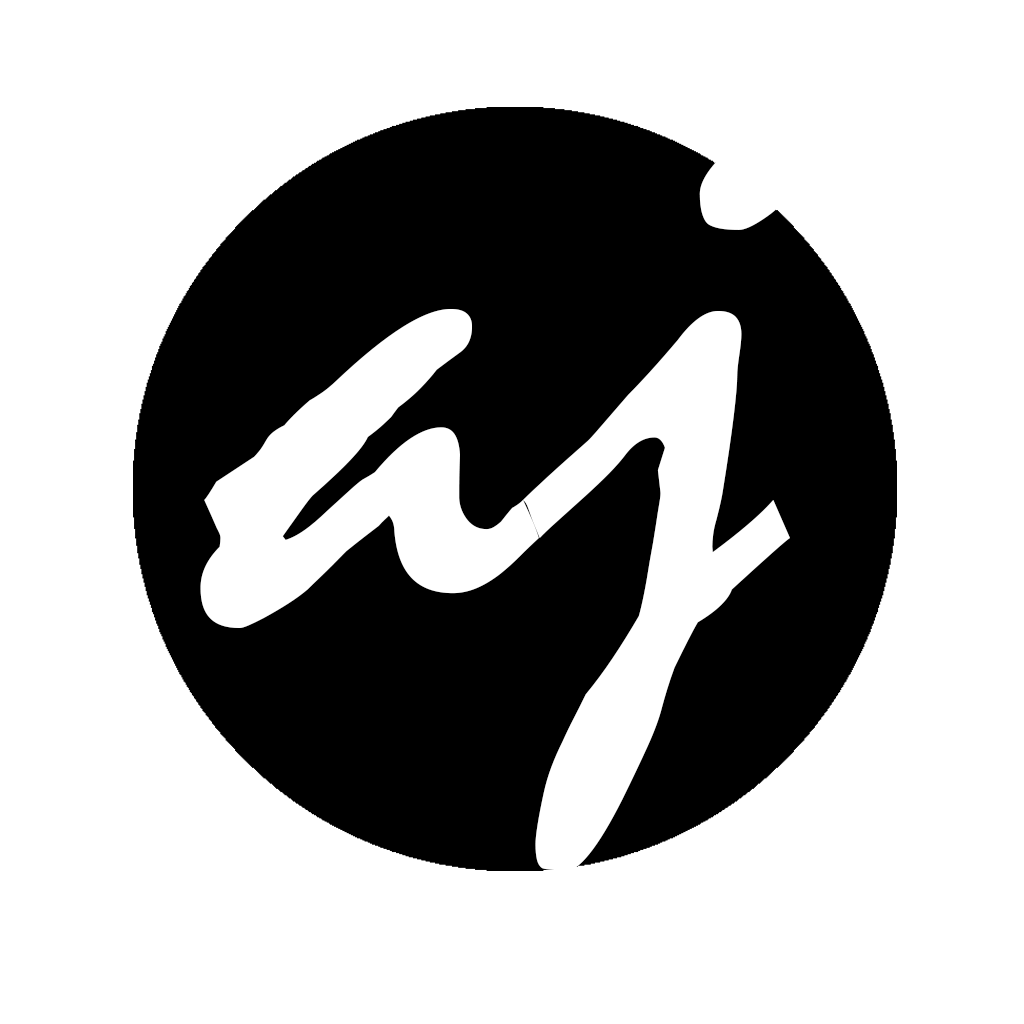
<style>
.page{position:relative;width:1024px;height:1024px;background:#ffffff}
.page>*{position:absolute;margin:0}
.t1{font:850px "Mistral";color:#ffffff}
</style>
<div class="page">
<p class="t1" style="left:200px;top:117px;width:605px;height:754px">aj</p>
</div>
